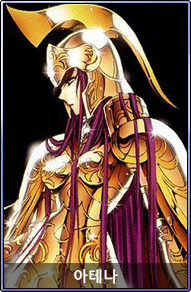
<style>
.page{position:relative;width:191px;height:292px}
.page>*{position:absolute;margin:0}
.t1{font:15px "MalgunGothicBold";color:#ffffff}
</style>
<div class="page">
<p class="t1" style="left:74px;top:269px;width:44px;height:15px">아테나</p>
</div>
